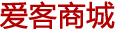
<style>
.page{position:relative;width:115px;height:30px;background:#ffffff}
.page>*{position:absolute;margin:0}
.t1{font:28px "MicrosoftYaHei";color:#b20000;font-weight:bold}
</style>
<div class="page">
<p class="t1" style="left:0px;top:1px;width:115px;height:28px">爱客商城</p>
</div>
